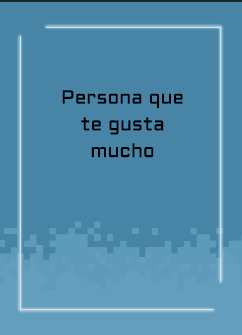
<style>
.page{position:relative;width:242px;height:335px;background:#4784a5}
.page>*{position:absolute;margin:0}
.t1{font:19.2px/26.7px "Aldrich-Regular";letter-spacing:0.005em;color:#000000}
</style>
<div class="page">
<p class="t1" style="left:62px;top:90px;width:121px;height:68px;text-align:center">Persona que<br>te gusta<br>mucho</p>
</div>
